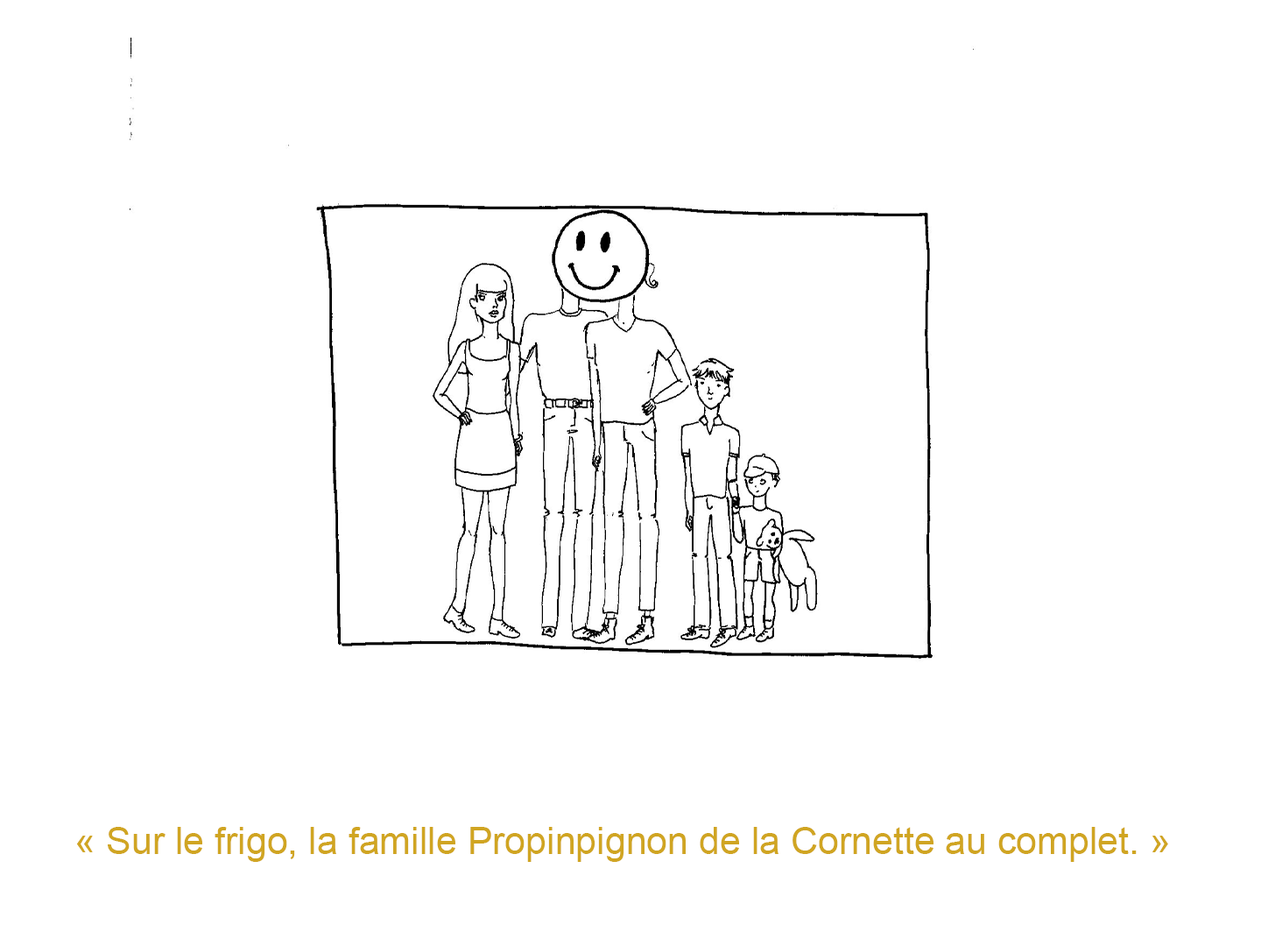
<style>
.page{position:relative;width:1261px;height:946px;background:#ffffff}
.page>*{position:absolute;margin:0}
.t1{font:37.5px "ArialMT";letter-spacing:0.001em;color:#d0a522}
</style>
<div class="page">
<p class="t1" style="left:77px;top:827px;width:1091px;height:35px">« Sur le frigo, la famille Propinpignon de la Cornette au complet. »</p>
</div>
